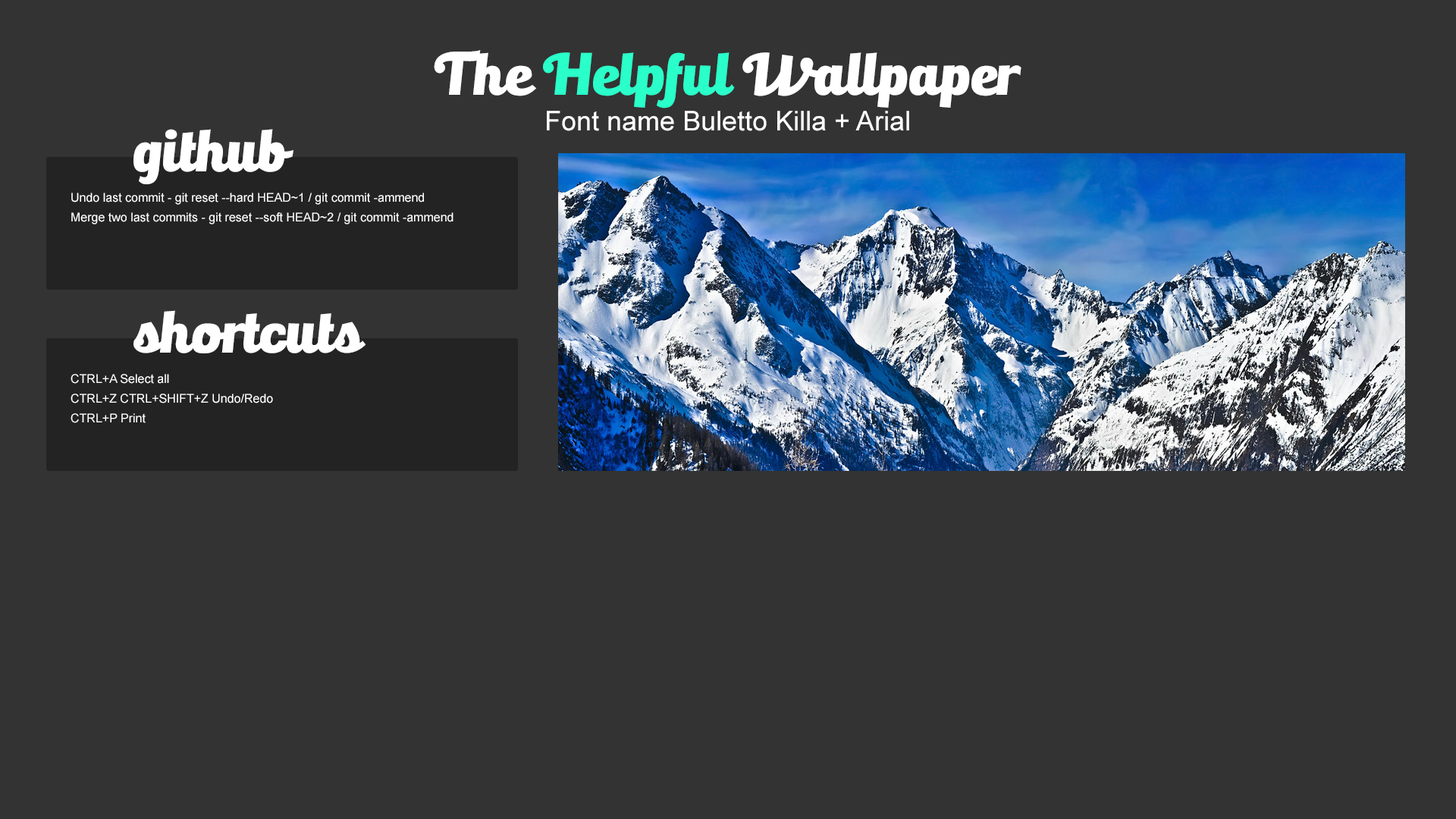
<style>
.page{position:relative;width:1456px;height:819px;background:#333333}
.page>*{position:absolute;margin:0}
.t1{font:54.6px "BullettoKilla";color:#ffffff}
.t2{font:54.6px "BullettoKilla";color:#2affca}
.t3{font:27.3px "ArialMT";color:#ffffff}
.t4{font:12.1px "ArialMT";color:#ffffff}
</style>
<div class="page">
<p class="t1" style="left:434px;top:50px;width:587px;height:58px">The <span class="t2">Helpful</span> Wallpaper</p>
<p class="t3" style="left:547px;top:111px;width:362px;height:20px">Font name Buletto Killa + Arial</p>
<p class="t1" style="left:133px;top:129px;width:160px;height:55px">github</p>
<p class="t4" style="left:71px;top:193px;width:353px;height:12px">Undo last commit - git reset --hard HEAD~1 / git commit -ammend</p>
<p class="t4" style="left:71px;top:212px;width:382px;height:12px">Merge two last commits - git reset --soft HEAD~2 / git commit -ammend</p>
<p class="t1" style="left:133px;top:310px;width:233px;height:43px">shortcuts</p>
<p class="t4" style="left:71px;top:374px;width:98px;height:10px">CTRL+A Select all</p>
<p class="t4" style="left:71px;top:394px;width:202px;height:9px">CTRL+Z CTRL+SHIFT+Z Undo/Redo</p>
<p class="t4" style="left:71px;top:413px;width:75px;height:10px">CTRL+P Print</p>
</div>
